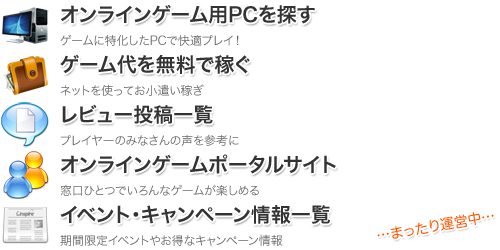
<style>
.page{position:relative;width:500px;height:250px;background:#ffffff}
.page>*{position:absolute;margin:0}
.t1{font:20px "HiraKakuPro-W6";color:#333333}
.t2{font:12px "HiraKakuPro-W3";color:#666666}
.t3{font:14px "HiraMaruPro-W4";color:#ff5500}
</style>
<div class="page">
<p class="t1" style="left:60px;top:4px;width:255px;height:20px">オンラインゲーム用PCを探す</p>
<p class="t2" style="left:60px;top:34px;width:179px;height:12px">ゲームに特化したPCで快適プレイ！</p>
<p class="t1" style="left:60px;top:54px;width:190px;height:20px">ゲーム代を無料で稼ぐ</p>
<p class="t2" style="left:60px;top:84px;width:144px;height:12px">ネットを使ってお小遣い稼ぎ</p>
<p class="t1" style="left:62px;top:104px;width:151px;height:20px">レビュー投稿一覧</p>
<p class="t2" style="left:60px;top:134px;width:179px;height:12px">プレイヤーのみなさんの声を参考に</p>
<p class="t1" style="left:60px;top:154px;width:276px;height:20px">オンラインゲームポータルサイト</p>
<p class="t2" style="left:60px;top:184px;width:199px;height:12px">窓口ひとつでいろんなゲームが楽しめる</p>
<p class="t1" style="left:60px;top:205px;width:270px;height:19px">イベント・キャンペーン情報一覧</p>
<p class="t3" style="left:377px;top:212px;width:117px;height:27px;rotate:-10deg">…まったり運営中…</p>
<p class="t2" style="left:60px;top:234px;width:223px;height:12px">期間限定イベントやお得なキャンペーン情報</p>
</div>
